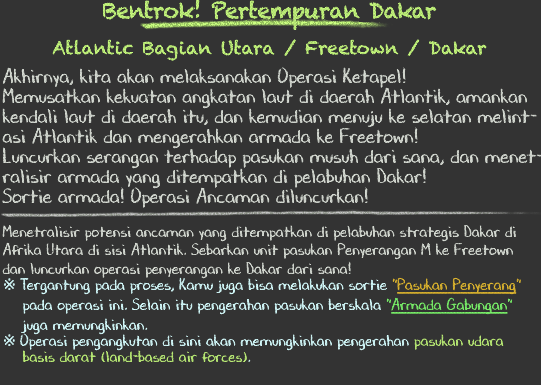
<style>
.page{position:relative;width:541px;height:385px;background:#333333}
.page>*{position:absolute;margin:0}
.t1{font:18px/36px "Chalkduster";color:#b7e775}
.t2{font:22px/36px "Chalkduster";letter-spacing:-0.04em;color:#b7e775}
.t3{font:20px/20px "DJBChalkItUp";color:#d9ded6}
.t4{font:16px/18px "DJBChalkItUp";color:#d9ded6}
.t5{font:16px/24px "DJBChalkItUp";color:#d9ded6}
.t6{font:16px/16px "TimesNewRomanPSMT";color:#d7feff}
.t7{font:16px/16px "DJBChalkItUp";color:#d7feff}
.t8{font:16px/16px "DJBChalkItUp";color:#dfb731}
.t9{font:16px/16px "DJBChalkItUp";color:#dfb731;text-decoration:underline}
.t10{font:16px/16px "DJBChalkItUp";color:#7bf26b}
.t11{font:16px/16px "DJBChalkItUp";color:#7bf26b;text-decoration:underline}
.t12{font:16px/20px "DJBChalkItUp";color:#d7feff}
.t13{font:16px/16px "DJBChalkItUp";color:#bdef78}
</style>
<div class="page">
<p class="t1" style="left:52px;top:0px;width:435px;height:61px;text-align:center"><span class="t2">Bentrok! Pertempuran Dakar<br></span>Atlantic Bagian Utara / Freetown / Dakar</p>
<p class="t3" style="left:2px;top:67px;width:541px;height:296px">Akhirnya, kita akan melaksanakan Operasi Ketapel!<br>Memusatkan kekuatan angkatan laut di daerah Atlantik, amankan<br>kendali laut di daerah itu, dan kemudian menuju ke selatan melint-<br>asi Atlantik dan mengerahkan armada ke Freetown!<br>Luncurkan serangan terhadap pasukan musuh dari sana, dan menet-<br>ralisir armada yang ditempatkan di pelabuhan Dakar!<br>Sortie armada! Operasi Ancaman diluncurkan!<br><br><span class="t4">Menetralisir potensi ancaman yang ditempatkan di pelabuhan strategis Dakar di<br>Afrika Utara di sisi Atlantik. Sebarkan unit pasukan Penyerangan M ke Freetown<br>dan luncurkan operasi penyerangan ke Dakar dari sana</span><span class="t5">!<br></span><span class="t6">※ </span><span class="t7">Tergantung pada proses, Kamu juga bisa melakukan sortie </span><span class="t8">"</span><span class="t9">Pasukan Penyerang</span><span class="t8">" <br>    </span><span class="t7">pada operasi ini. Selain itu pengerahan pasukan berskala </span><span class="t10">"</span><span class="t11">Armada Gabungan</span><span class="t10">" <br>    </span><span class="t12">juga memungkinkan.<br></span><span class="t6">※ </span><span class="t7">Operasi pengangkutan di sini akan memungkinkan pengerahan </span><span class="t13">pasukan udara<br>    basis darat (land-based air forces)</span><span class="t7">.</span></p>
</div>
